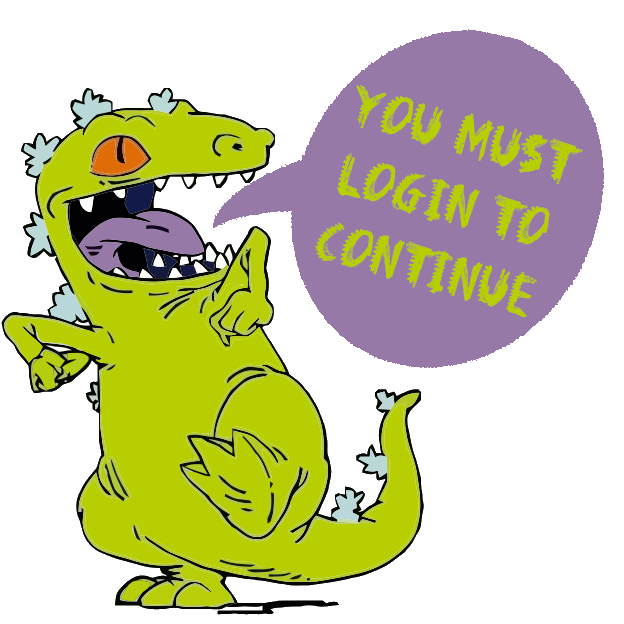
<style>
.page{position:relative;width:624px;height:624px;background:#ffffff}
.page>*{position:absolute;margin:0}
.t1{font:57.7px "Dinosaur";color:#b7ce02}
</style>
<div class="page">
<p class="t1" style="left:315px;top:85px;width:268px;height:233px;text-align:center;rotate:16deg">You must<br> login to <br>continuE</p>
</div>
